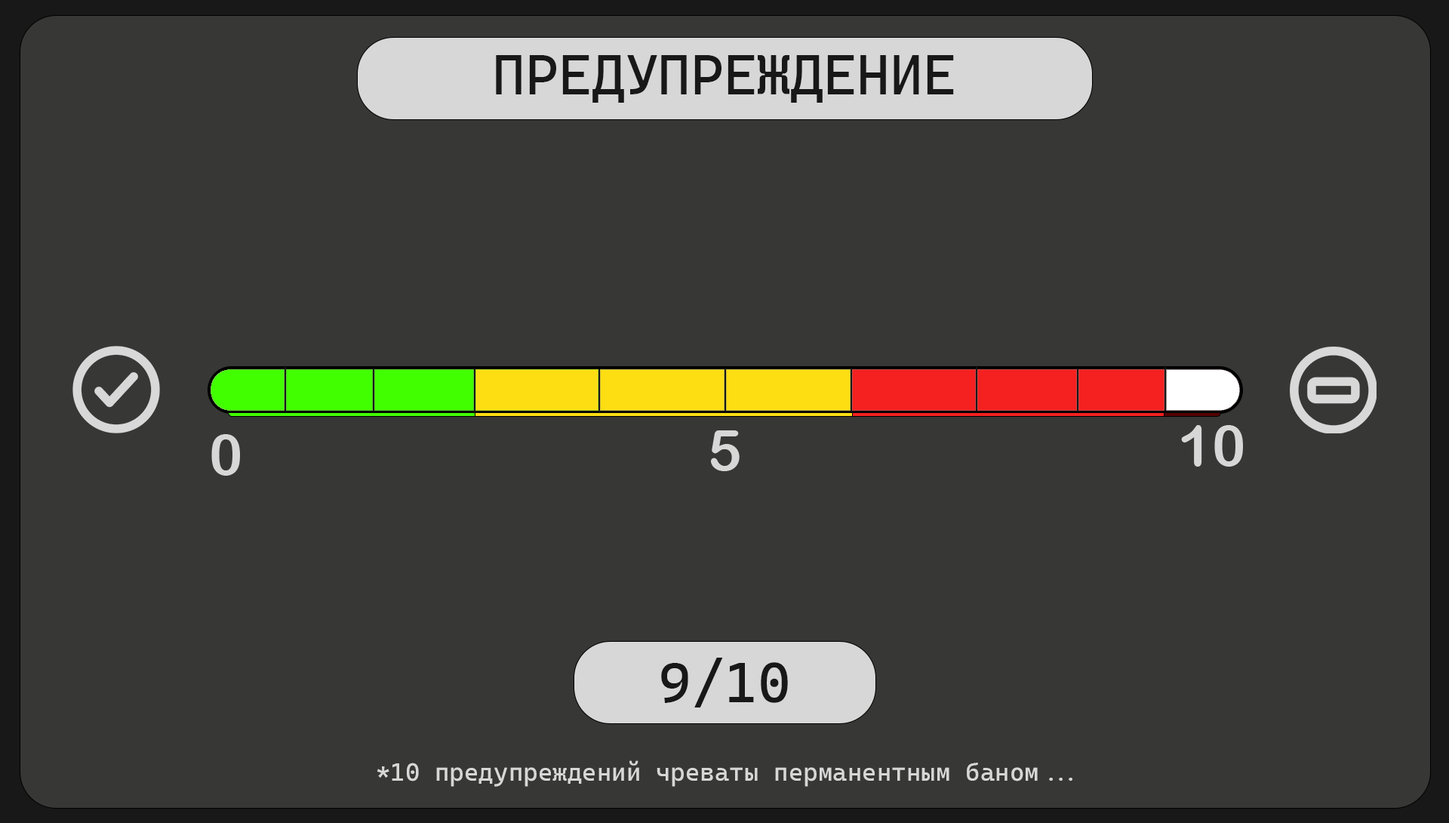
<style>
.page{position:relative;width:1449px;height:823px;background:#373735}
.page>*{position:absolute;margin:0}
.t1{font:56.6px "CaskaydiaCoveNF-Regular";color:#181818}
.t2{font:25.2px "CaskaydiaCoveNF-Regular";color:#d7d7d7}
</style>
<div class="page">
<p class="t1" style="left:496px;top:55px;width:458px;height:48px">ПРЕДУПРЕЖДЕНИЕ</p>
<p class="t1" style="left:661px;top:657px;width:127px;height:50px">9/10</p>
<p class="t2" style="left:377px;top:760px;width:696px;height:27px">*10 предупреждений чреваты перманентным баном...</p>
</div>
